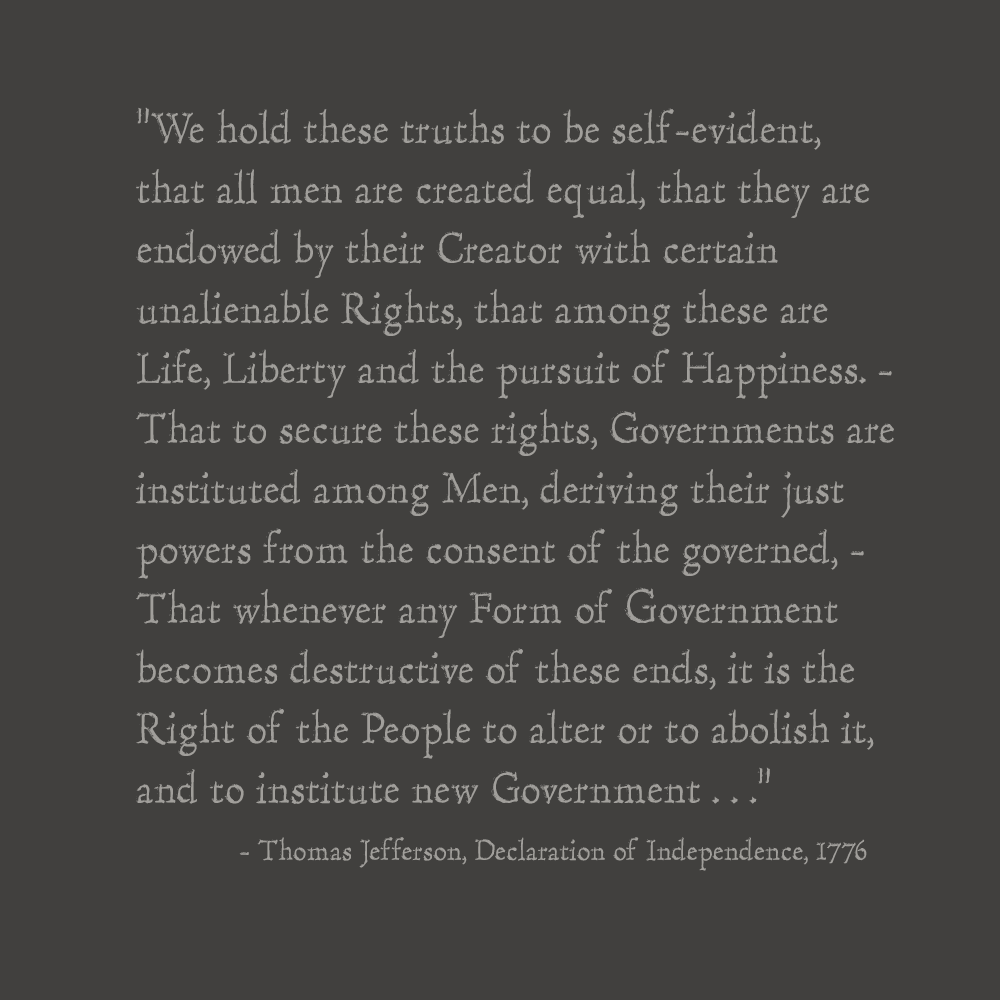
<style>
.page{position:relative;width:1000px;height:1000px;background:#41403e}
.page>*{position:absolute;margin:0}
.t1{font:45px/60px "HultogEngraved";color:#a19f9b}
.t2{font:50px/60px "HultogEngraved";color:#a19f9b}
.t3{font:30px "HultogEngraved";color:#a19f9b}
</style>
<div class="page">
<p class="t1" style="left:135px;top:107px;width:759px;height:697px">“We hold these truths to be self-evident, that all men are created equal, that they are endowed by their Creator with certain unalienable Rights, that among these are Life, Liberty and the pursuit of Happiness. — That to secure these rights, Governments are instituted among Men, deriving their just powers from the consent of the governed, — That whenever any Form of <span class="t2">G</span>overnment becomes destructive of these ends, it is the Right of the People to alter or to abolish it, and to institute new Government . . .”</p>
<p class="t3" style="left:239px;top:837px;width:628px;height:34px">- Thomas Jefferson, Declaration of Independence, 1776</p>
</div>
